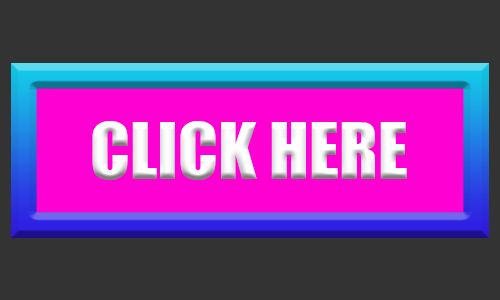
<style>
.page{position:relative;width:500px;height:300px;background:#333333}
.page>*{position:absolute;margin:0}
.t1{font:72px "Impact";color:#ffffff}
</style>
<div class="page">
<p class="t1" style="left:92px;top:121px;width:315px;height:59px">CLICK HERE</p>
</div>
